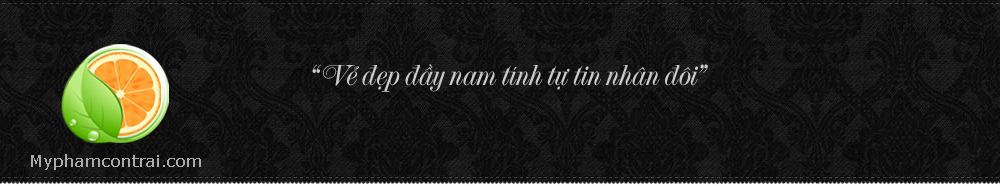
<style>
.page{position:relative;width:1000px;height:186px}
.page>*{position:absolute;margin:0}
.t1{font:30px "UTM-French-Vanilla";color:#cbcbcb}
.t2{font:17px "Verdana";color:#ababab}
</style>
<div class="page">
<p class="t1" style="left:312px;top:64px;width:396px;height:28px">“ Vẻ đẹp đầy nam tính tự tin nhân đôi”</p>
<p class="t2" style="left:31px;top:154px;width:170px;height:16px">Myphamcontrai.com</p>
</div>
